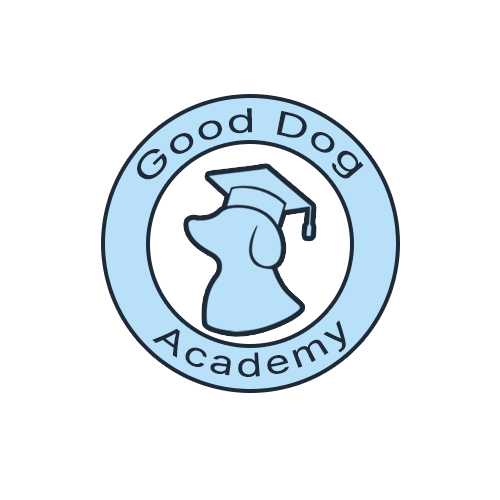
<style>
.page{position:relative;width:500px;height:500px;background:#ffffff}
.page>*{position:absolute;margin:0}
.t1{font:33.6px "Pretendard-Regular";letter-spacing:0.075em;color:#1e2a38}
</style>
<div class="page">
<p class="t1" style="left:137px;top:108px;width:227px;height:72px;rotate:-1deg">Good Dog</p>
<p class="t1" style="left:152px;top:320px;width:194px;height:57px;rotate:-3deg">Academy</p>
</div>
